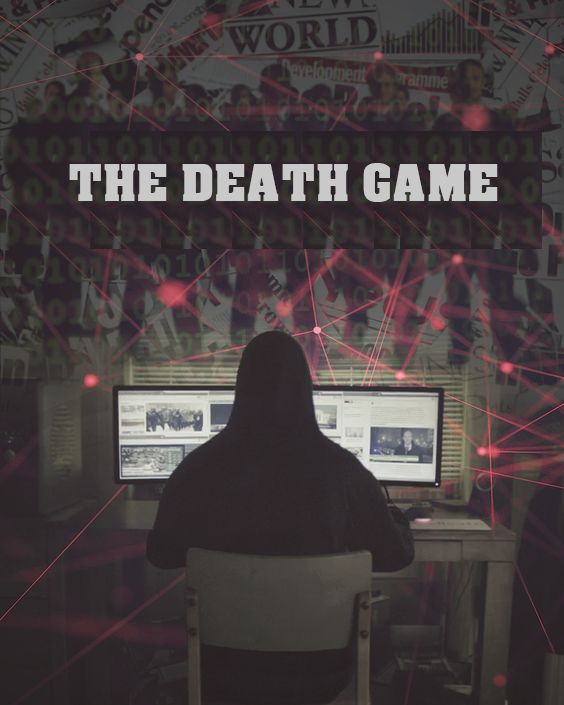
<style>
.page{position:relative;width:564px;height:705px}
.page>*{position:absolute;margin:0}
.t1{font:48px "AcmeFont";color:#c9c9c9}
</style>
<div class="page">
<p class="t1" style="left:69px;top:163px;width:429px;height:39px">THE DEATH GAME</p>
</div>
